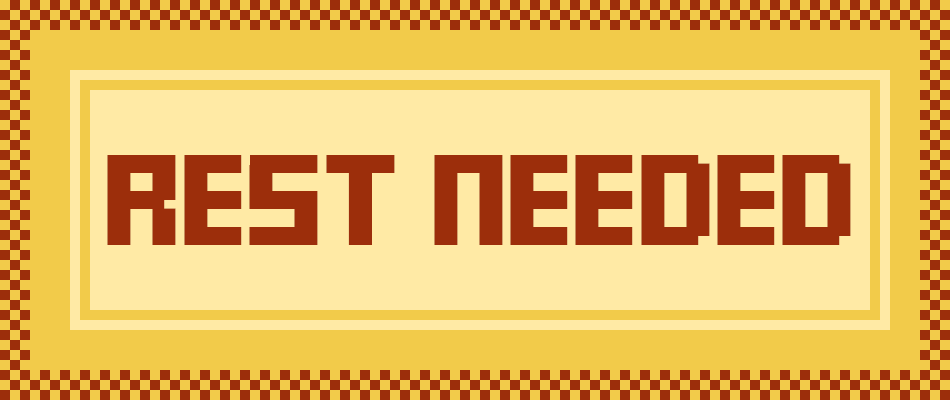
<style>
.page{position:relative;width:950px;height:400px;background:#ffeaa5}
.page>*{position:absolute;margin:0}
.t1{font:72px "FFFForward";letter-spacing:-0.025em;color:#9c2e0b;scale:1.25 1}
</style>
<div class="page">
<p class="t1" style="left:107px;top:155px;width:744px;height:90px">REST NEEDED</p>
</div>
